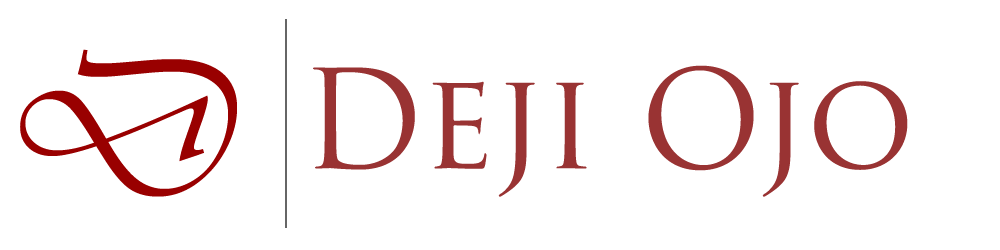
<style>
.page{position:relative;width:1000px;height:250px;background:#ffffff}
.page>*{position:absolute;margin:0}
.t1{font:204.2px "Vivaldii";color:#990000}
.t2{font:133.3px "TrajanPro-Regular";color:#993333}
</style>
<div class="page">
<p class="t1" style="left:20px;top:49px;width:217px;height:148px">D</p>
<p class="t2" style="left:313px;top:65px;width:595px;height:132px">Deji Ojo</p>
</div>
